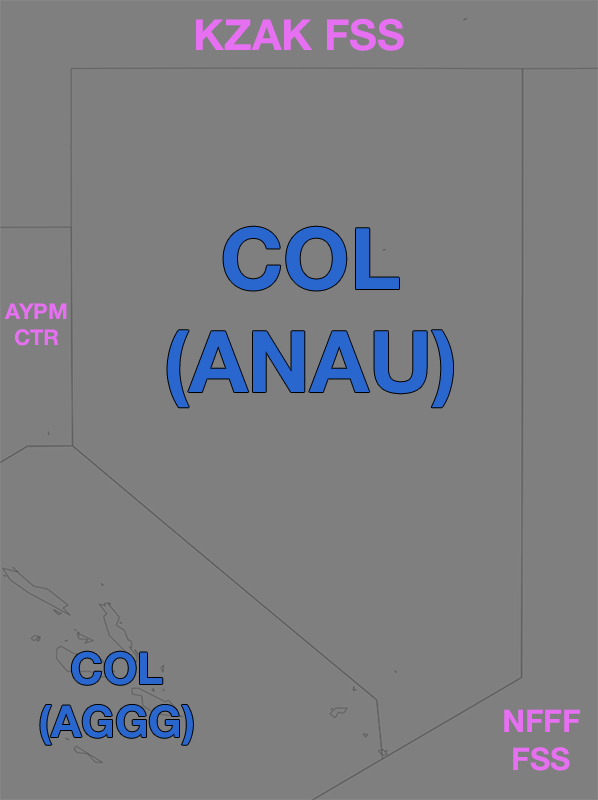
<style>
.page{position:relative;width:598px;height:800px;background:#7f7f7f}
.page>*{position:absolute;margin:0}
.t1{font:42.8px "HelveticaNeue-Bold";color:#e670f1}
.t2{font:85.3px "HelveticaNeue-Bold";color:#2967cf}
.t3{font:21.8px "HelveticaNeue-Bold";color:#e670f1}
.t4{font:44.2px "HelveticaNeue-Bold";color:#2967cf}
.t5{font:31.4px "HelveticaNeue-Bold";color:#e670f1}
</style>
<div class="page">
<p class="t1" style="left:196px;top:18px;width:208px;height:33px">KZAK FSS</p>
<p class="t2" style="left:167px;top:226px;width:286px;height:182px;text-align:center">COL<br>(ANAU)</p>
<p class="t3" style="left:4px;top:303px;width:63px;height:43px;text-align:center">AYPM<br>CTR</p>
<p class="t4" style="left:40px;top:651px;width:153px;height:94px;text-align:center">COL<br>(AGGG)</p>
<p class="t5" style="left:504px;top:709px;width:76px;height:62px;text-align:center">NFFF<br>FSS</p>
</div>
